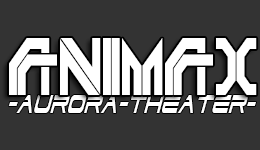
<style>
.page{position:relative;width:260px;height:150px;background:#333333}
.page>*{position:absolute;margin:0}
.t1{font:80.1px "DEPLETEDURANIUM";color:#ffffff;scale:0.7 1}
.t2{font:31.6px "DodgerCondensedItalic";color:#ffffff;scale:0.63 1}
</style>
<div class="page">
<p class="t1" style="left:9px;top:38px;width:248px;height:57px">ANIMAX</p>
<p class="t2" style="left:8px;top:95px;width:248px;height:18px">-AURORA-THEATER-</p>
</div>
